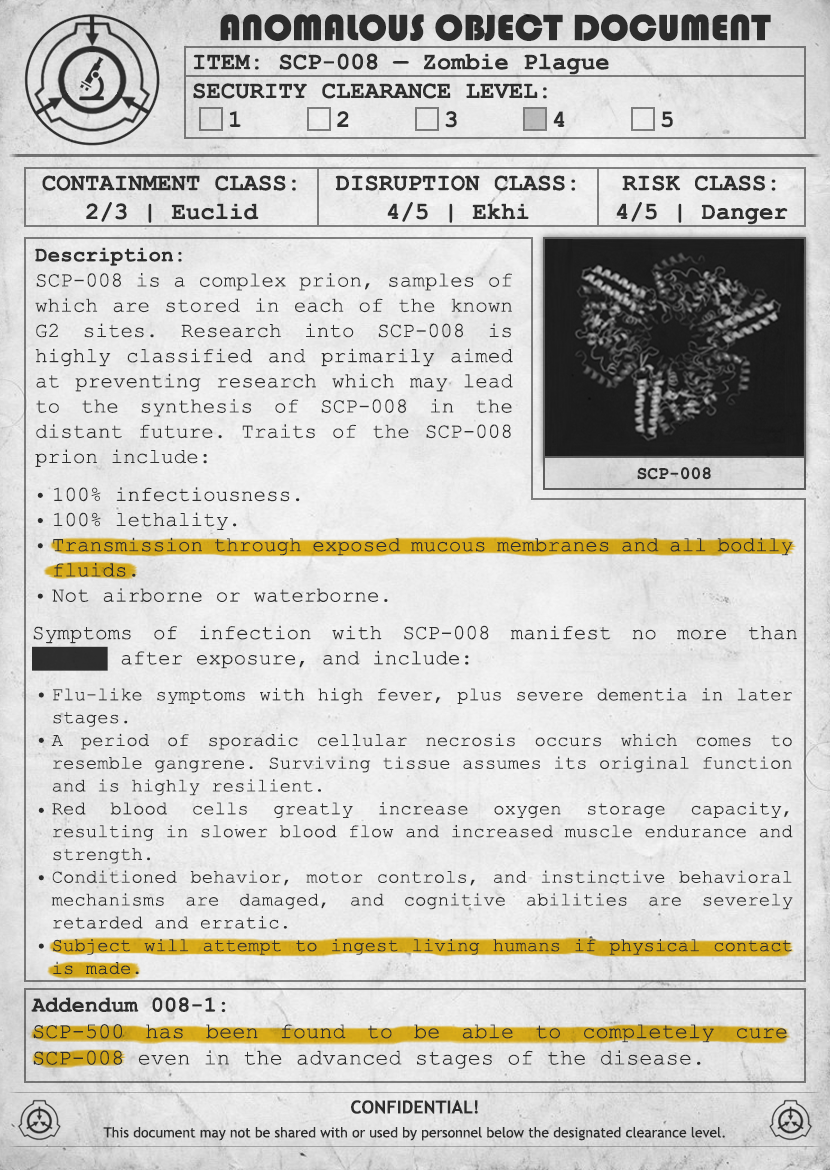
<style>
.page{position:relative;width:830px;height:1170px}
.page>*{position:absolute;margin:0}
.t1{font:38px "Bauhaus93";color:#333333;text-transform:uppercase}
.t2{font:24px "CourierNewPS-BoldMT";color:#333333}
.t3{font:24px "CourierNewPS-BoldMT";color:#333333;text-transform:uppercase}
.t4{font:21px "CourierNewPSMT";color:#333333}
.t5{font:21px "CourierNewPS-BoldMT";color:#333333}
.t6{font:18px "CourierNewPS-BoldMT";color:#333333}
.t7{font:19px "CourierNewPSMT";color:#333333}
.t8{font:22px "CourierNewPSMT";color:#333333}
.t9{font:22px "CourierNewPS-BoldMT";color:#333333}
.t10{font:14px/24px "TrebuchetMS";color:#333333}
.t11{font:18px/24px "TrebuchetMS-Bold";color:#333333}
</style>
<div class="page">
<p class="t1" style="left:220px;top:14px;width:551px;height:27px">anomalous object document</p>
<p class="t2" style="left:193px;top:53px;width:480px;height:75px">ITEM: SCP-008 — Zombie Plague<br><span class="t3">Security CLEARANCE LEVEL:</span> <br> 1   2   3   4   5</p>
<p class="t2" style="left:42px;top:175px;width:254px;height:48px;text-align:center">CONTAINMENT CLASS:<br>2/3 | Euclid</p>
<p class="t2" style="left:335px;top:175px;width:241px;height:48px;text-align:center">DISRUPTION CLASS:<br>4/5 | Ekhi</p>
<p class="t2" style="left:616px;top:175px;width:172px;height:50px;text-align:center">RISK CLASS:<br>4/5 | Danger</p>
<p class="t4" style="left:35px;top:247px;width:478px;height:220px;text-align:justify"><span class="t5">Description:<br></span>SCP-008 is a complex prion, samples of which are stored in each of the known G2 sites. Research into SCP-008 is highly classified and primarily aimed at preventing research which may lead to the synthesis of SCP-008 in the distant future. Traits of the SCP-008 prion include:</p>
<p class="t6" style="left:637px;top:467px;width:74px;height:13px">SCP-008</p>
<p class="t4" style="left:37px;top:492px;width:6px;height:107px;text-align:justify">•<br>• <br>• <br><br>•</p>
<p class="t4" style="left:52px;top:487px;width:741px;height:115px;text-align:justify">100% infectiousness.<br>100% lethality.<br>Transmission through exposed mucous membranes and all bodily fluids.<br>Not airborne or waterborne.</p>
<p class="t4" style="left:32px;top:625px;width:765px;height:46px;text-align:justify">Symptoms of infection with SCP-008 manifest no more than ██████ after exposure, and include:</p>
<p class="t7" style="left:51px;top:688px;width:742px;height:287px;text-align:justify">Flu-like symptoms with high fever, plus severe dementia in later stages.<br>A period of sporadic cellular necrosis occurs which comes to resemble gangrene. Surviving tissue assumes its original function and is highly resilient.<br>Red blood cells greatly increase oxygen storage capacity, resulting in slower blood flow and increased muscle endurance and strength.<br>Conditioned behavior, motor controls, and instinctive behavioral mechanisms are damaged, and cognitive abilities are severely retarded and erratic.<br>Subject will attempt to ingest living humans if physical contact is made.</p>
<p class="t4" style="left:38px;top:692px;width:6px;height:6px">•</p>
<p class="t4" style="left:38px;top:737px;width:6px;height:6px">•</p>
<p class="t4" style="left:38px;top:807px;width:6px;height:6px">•</p>
<p class="t4" style="left:38px;top:875px;width:6px;height:6px">•</p>
<p class="t4" style="left:38px;top:943px;width:6px;height:6px">•</p>
<p class="t8" style="left:31px;top:997px;width:756px;height:72px;text-align:justify"><span class="t9">Addendum 008-1:</span> <br>SCP-500 has been found to be able to completely cure SCP-008 even in the advanced stages of the disease.</p>
<p class="t10" style="left:103px;top:1100px;width:622px;height:41px;text-align:center"><span class="t11">CONFIDENTIAL!<br></span>This document may not be shared with or used by personnel below the designated clearance level.</p>
</div>
